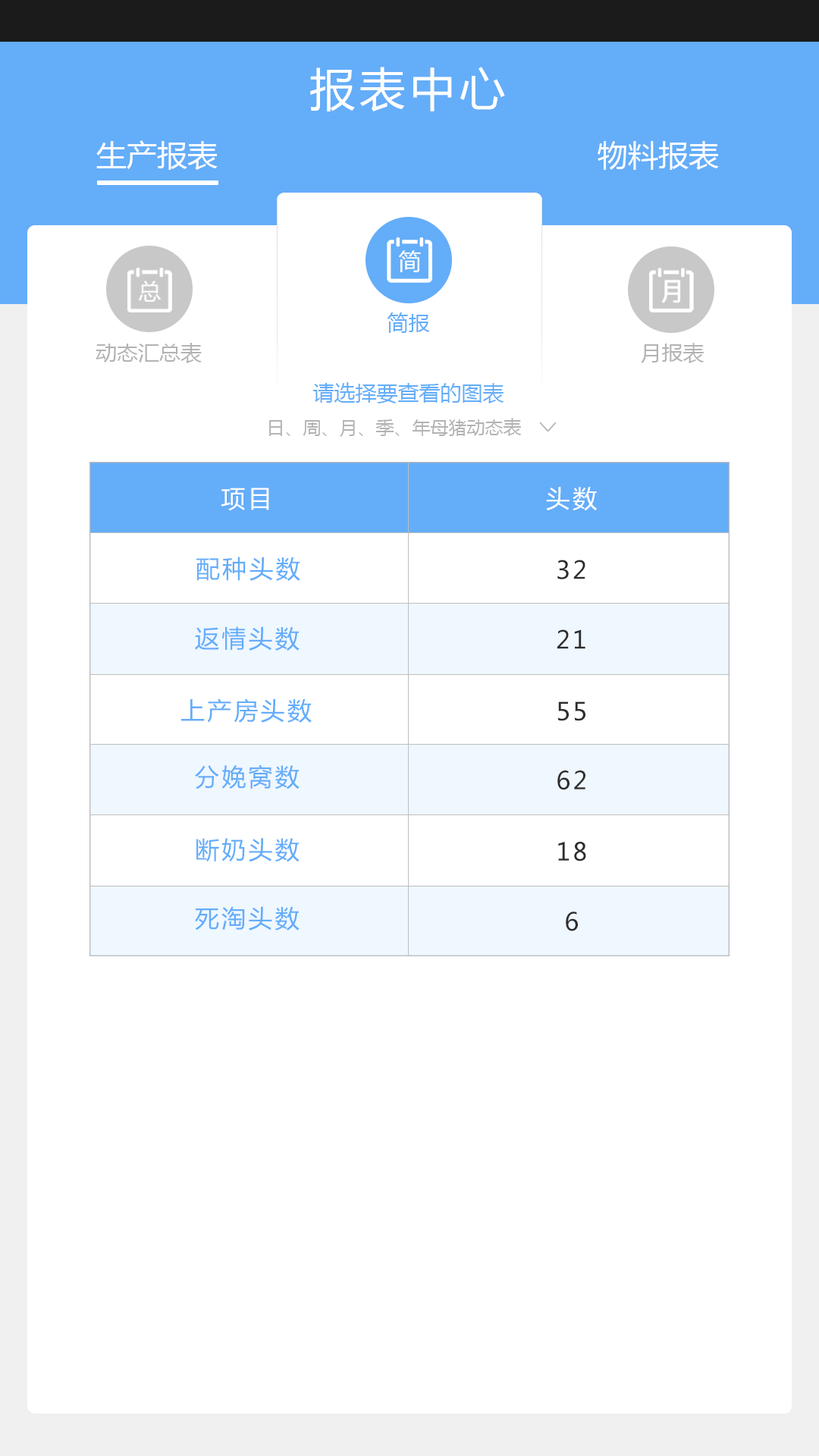
<style>
.page{position:relative;width:819px;height:1456px;background:#ffffff}
.page>*{position:absolute;margin:0}
.t1{font:45.5px "MicrosoftYaHei";letter-spacing:0.1em;color:#fefefe}
.t2{font:30.3px "MicrosoftYaHei";color:#ffffff}
.t3{font:21.2px "MicrosoftYaHei";color:#64adf9}
.t4{font:21.2px "MicrosoftYaHei";color:#b3b3b3}
.t5{font:18.2px "MicrosoftYaHei";color:#b3b3b3}
.t6{font:24.3px "MicrosoftYaHei";letter-spacing:0.1em;color:#ffffff}
.t7{font:24.3px "MicrosoftYaHei";letter-spacing:0.1em;color:#64adf9}
.t8{font:24.3px "MicrosoftYaHei";letter-spacing:0.1em;color:#2d2d2d}
</style>
<div class="page">
<p class="t1" style="left:310px;top:67px;width:195px;height:44px">报表中心</p>
<p class="t2" style="left:96px;top:140px;width:122px;height:30px">生产报表</p>
<p class="t2" style="left:598px;top:141px;width:121px;height:29px">物料报表</p>
<p class="t3" style="left:387px;top:312px;width:43px;height:21px">简报</p>
<p class="t4" style="left:96px;top:343px;width:106px;height:20px">动态汇总表</p>
<p class="t4" style="left:641px;top:343px;width:63px;height:20px">月报表</p>
<p class="t3" style="left:313px;top:382px;width:191px;height:21px">请选择要查看的图表</p>
<p class="t5" style="left:269px;top:418px;width:253px;height:19px">日、周、月、季、年母猪动态表</p>
<p class="t6" style="left:221px;top:488px;width:48px;height:23px">项目</p>
<p class="t6" style="left:546px;top:487px;width:51px;height:24px">头数</p>
<p class="t7" style="left:196px;top:557px;width:104px;height:24px">配种头数</p>
<p class="t8" style="left:557px;top:560px;width:28px;height:19px">32</p>
<p class="t7" style="left:195px;top:626px;width:105px;height:25px">返情头数</p>
<p class="t8" style="left:557px;top:629px;width:28px;height:20px">21</p>
<p class="t7" style="left:180px;top:698px;width:132px;height:25px">上产房头数</p>
<p class="t8" style="left:558px;top:701px;width:27px;height:20px">55</p>
<p class="t7" style="left:195px;top:764px;width:105px;height:25px">分娩窝数</p>
<p class="t8" style="left:557px;top:770px;width:28px;height:20px">62</p>
<p class="t7" style="left:196px;top:838px;width:104px;height:24px">断奶头数</p>
<p class="t8" style="left:558px;top:842px;width:28px;height:19px">18</p>
<p class="t7" style="left:195px;top:906px;width:105px;height:24px">死淘头数</p>
<p class="t8" style="left:566px;top:912px;width:12px;height:19px">6</p>
</div>
